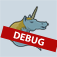
<style>
.page{position:relative;width:57px;height:57px;background:#ccd8e1}
.page>*{position:absolute;margin:0}
.t1{font:10px "MyriadPro-Bold";color:#ffffff}
</style>
<div class="page">
<p class="t1" style="left:13px;top:31px;width:32px;height:15px;rotate:15deg">DEBUG</p>
</div>
